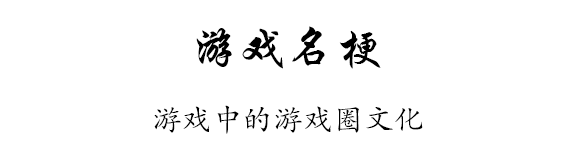
<style>
.page{position:relative;width:580px;height:160px;background:#ffffff}
.page>*{position:absolute;margin:0}
.t1{font:48px "STXingkai";letter-spacing:0.01em;color:#000000}
.t2{font:30px "FZKTJW--GB1-0";letter-spacing:0.01em;color:#000000}
</style>
<div class="page">
<p class="t1" style="left:196px;top:26px;width:185px;height:43px">游戏名梗</p>
<p class="t2" style="left:154px;top:105px;width:269px;height:29px">游戏中的游戏圈文化</p>
</div>
